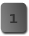
<style>
.page{position:relative;width:29px;height:36px}
.page>*{position:absolute;margin:0}
.t1{font:11.4px "DejaVuSansCondensed";letter-spacing:-0.08em;color:#333333;font-weight:bold;scale:1.5 1}
</style>
<div class="page">
<p class="t1" style="left:10px;top:14px;width:8px;height:9px">1</p>
</div>
